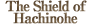
<style>
.page{position:relative;width:92px;height:26px;background:#ffffff}
.page>*{position:absolute;margin:0}
.t1{font:14px/12px "RyuminPro-ExBold";letter-spacing:-0.08em;color:#6a563e;font-weight:bold}
</style>
<div class="page">
<p class="t1" style="left:5px;top:0px;width:82px;height:24px;text-align:center">The Shield of<br>Hachinohe</p>
</div>
